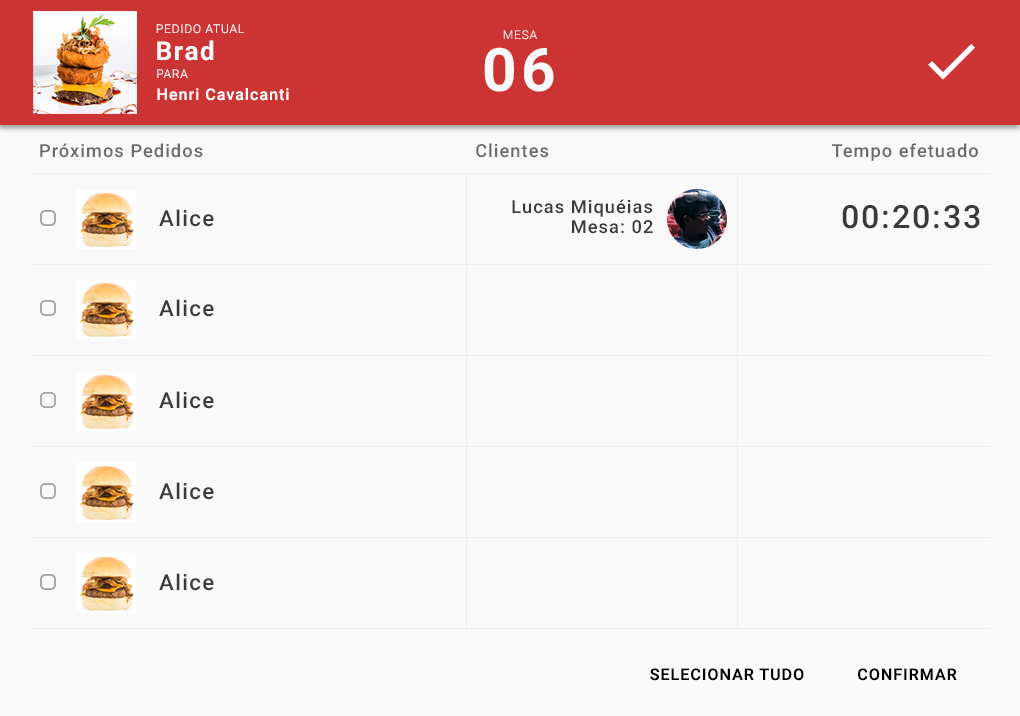
<style>
.page{position:relative;width:1020px;height:716px;background:#f9f9f9}
.page>*{position:absolute;margin:0}
.t1{font:12px "Roboto-Light";letter-spacing:0.06em;color:#f9f9f9}
.t2{font:26px "Roboto-Bold";letter-spacing:0.06em;color:#f9f9f9}
.t3{font:60px "Roboto-Bold";letter-spacing:0.06em;color:#f9f9f9}
.t4{font:16px "Roboto-Medium";letter-spacing:0.06em;color:#f9f9f9}
.t5{font:18px "Roboto-Medium";letter-spacing:0.06em;color:#6b6b6b}
.t6{font:22px "Roboto-Medium";letter-spacing:0.06em;color:#3a3a3a}
.t7{font:18px "Roboto-Medium";letter-spacing:0.06em;color:#3a3a3a}
.t8{font:32px "Roboto-Medium";letter-spacing:0.06em;color:#3a3a3a}
.t9{font:16px "Roboto-Medium";letter-spacing:0.06em;color:#000000}
</style>
<div class="page">
<p class="t1" style="left:156px;top:24px;width:88px;height:10px">PEDIDO ATUAL</p>
<p class="t1" style="left:503px;top:30px;width:34px;height:10px">MESA</p>
<p class="t2" style="left:157px;top:40px;width:57px;height:21px">Brad</p>
<p class="t3" style="left:484px;top:47px;width:70px;height:45px">06</p>
<p class="t1" style="left:157px;top:69px;width:31px;height:9px">PARA</p>
<p class="t4" style="left:157px;top:88px;width:132px;height:13px">Henri Cavalcanti</p>
<p class="t5" style="left:40px;top:143px;width:163px;height:15px">Próximos Pedidos</p>
<p class="t5" style="left:476px;top:143px;width:73px;height:15px">Clientes</p>
<p class="t5" style="left:832px;top:143px;width:146px;height:18px">Tempo efetuado</p>
<p class="t6" style="left:159px;top:209px;width:55px;height:18px">Alice</p>
<p class="t7" style="left:512px;top:199px;width:141px;height:18px">Lucas Miquéias</p>
<p class="t8" style="left:842px;top:205px;width:138px;height:24px">00:20:33</p>
<p class="t7" style="left:572px;top:220px;width:81px;height:14px">Mesa: 02</p>
<p class="t6" style="left:159px;top:299px;width:55px;height:18px">Alice</p>
<p class="t6" style="left:159px;top:391px;width:55px;height:18px">Alice</p>
<p class="t6" style="left:159px;top:482px;width:55px;height:18px">Alice</p>
<p class="t6" style="left:159px;top:573px;width:55px;height:18px">Alice</p>
<p class="t9" style="left:650px;top:668px;width:154px;height:13px">SELECIONAR TUDO</p>
<p class="t9" style="left:858px;top:668px;width:99px;height:13px">CONFIRMAR</p>
</div>
